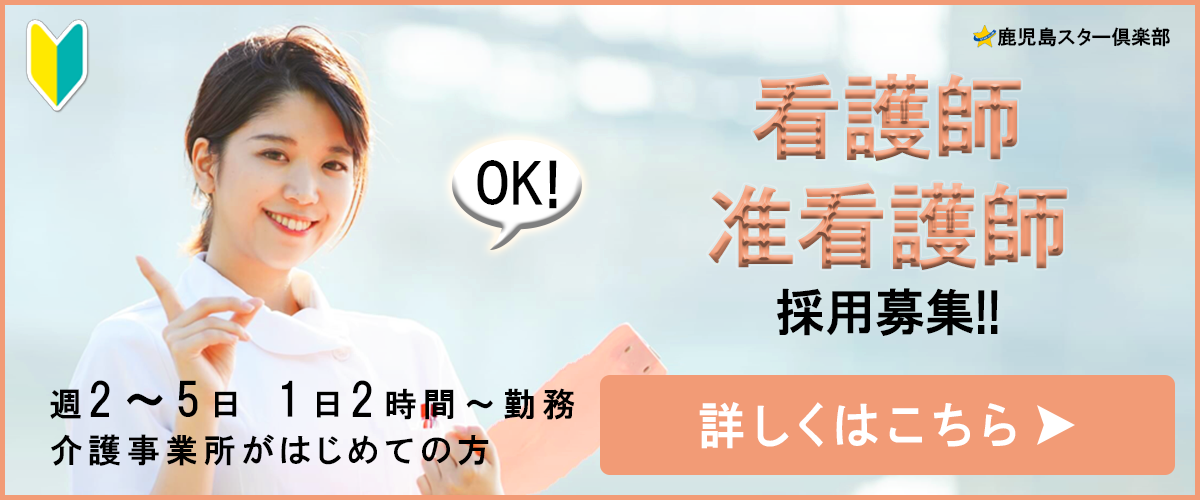
<style>
.page{position:relative;width:1200px;height:500px}
.page>*{position:absolute;margin:0}
.t1{font:20px "HGPGothicE";color:#000000}
.t2{font:91.2px/108.9px "HGPGothicE"}
.t3{font:55px "HGPGothicE";color:#000000}
.t4{font:50px "HGPGothicE";color:#000000}
.t5{font:33px "HGPGothicE";letter-spacing:0.2em;color:#000000}
.t6{font:45px "HGPGothicE";letter-spacing:0.2em;color:#000000}
.t7{font:50px "HGPGothicE";letter-spacing:0.16em;color:#ffffff;scale:0.95 1}
.t8{font:33px "HGPGothicE";letter-spacing:0.16em;color:#000000}
</style>
<div class="page">
<p class="t1" style="left:997px;top:27px;width:173px;height:20px">鹿児島スター倶楽部</p>
<p class="t2" style="left:708px;top:73px;width:359px;height:197px;text-align:center">看護師 准看護師</p>
<p class="t3" style="left:477px;top:160px;width:80px;height:49px">OK!</p>
<p class="t4" style="left:777px;top:288px;width:221px;height:48px">採用募集!!</p>
<p class="t5" style="left:50px;top:380px;width:525px;height:40px">週<span class="t6">2～5</span>日　<span class="t6">1</span>日<span class="t6">2</span>時間～勤務</p>
<p class="t7" style="left:699px;top:402px;width:317px;height:47px">詳しくはこちら</p>
<p class="t8" style="left:51px;top:434px;width:438px;height:32px">介護事業所がはじめての方</p>
</div>
